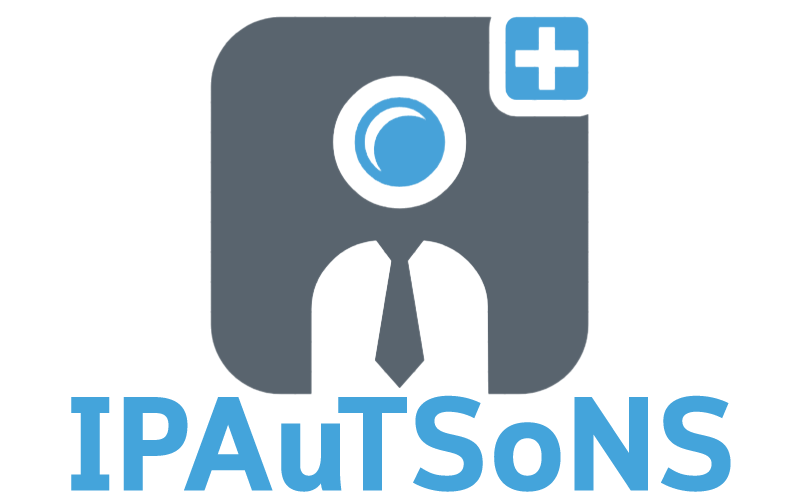
<style>
.page{position:relative;width:800px;height:500px;background:#ffffff}
.page>*{position:absolute;margin:0}
.t1{font:133.3px "Cloud-Bold";color:#44a4db}
</style>
<div class="page">
<p class="t1" style="left:71px;top:395px;width:660px;height:97px">IPAuTSoNS</p>
</div>
